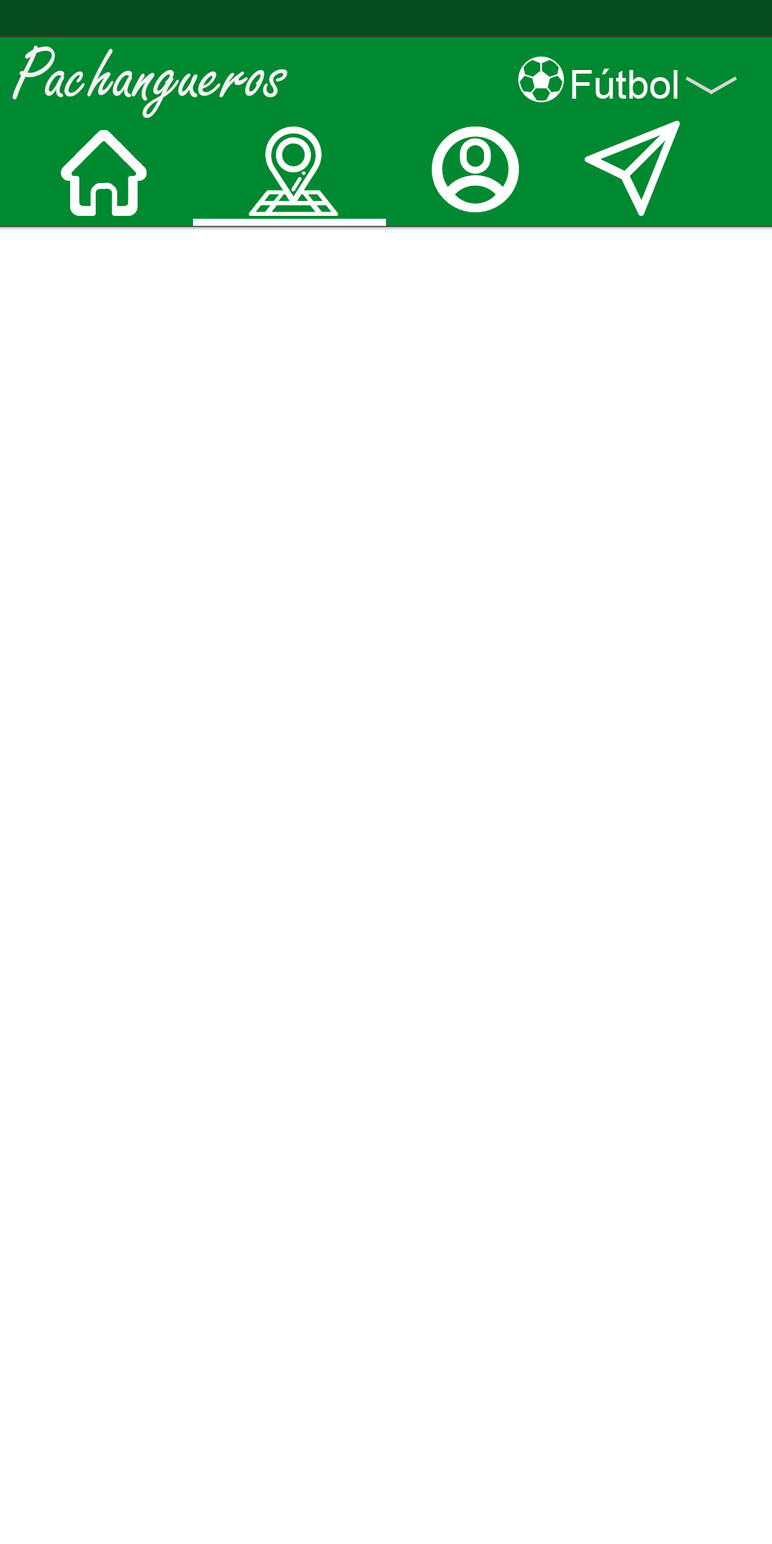
<style>
.page{position:relative;width:772px;height:1544px;background:#ffffff}
.page>*{position:absolute;margin:0}
.t1{font:80px "FreestyleScript-Regular";color:#f2f2f2}
.t2{font:40px "ArialMT";color:#ffffff}
</style>
<div class="page">
<p class="t1" style="left:12px;top:46px;width:275px;height:72px">Pachangueros</p>
<p class="t2" style="left:572px;top:69px;width:106px;height:30px">Fútbol</p>
</div>
